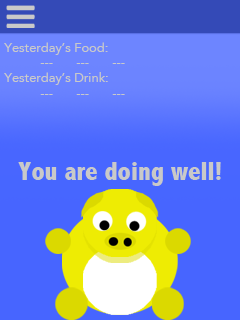
<style>
.page{position:relative;width:240px;height:320px;background:#4765ff}
.page>*{position:absolute;margin:0}
.t1{font:12.9px "Avenir-Roman";color:#c9c9c9}
.t2{font:26.9px "AbadiMT-CondensedExtraBold";color:#c9c9c9}
</style>
<div class="page">
<p class="t1" style="left:4px;top:42px;width:121px;height:53px;text-align:justify">Yesterday’s Food:<br> --- --- ---<br>Yesterday’s Drink:<br> --- --- ---</p>
<p class="t2" style="left:18px;top:162px;width:203px;height:24px">You are doing well!</p>
</div>
